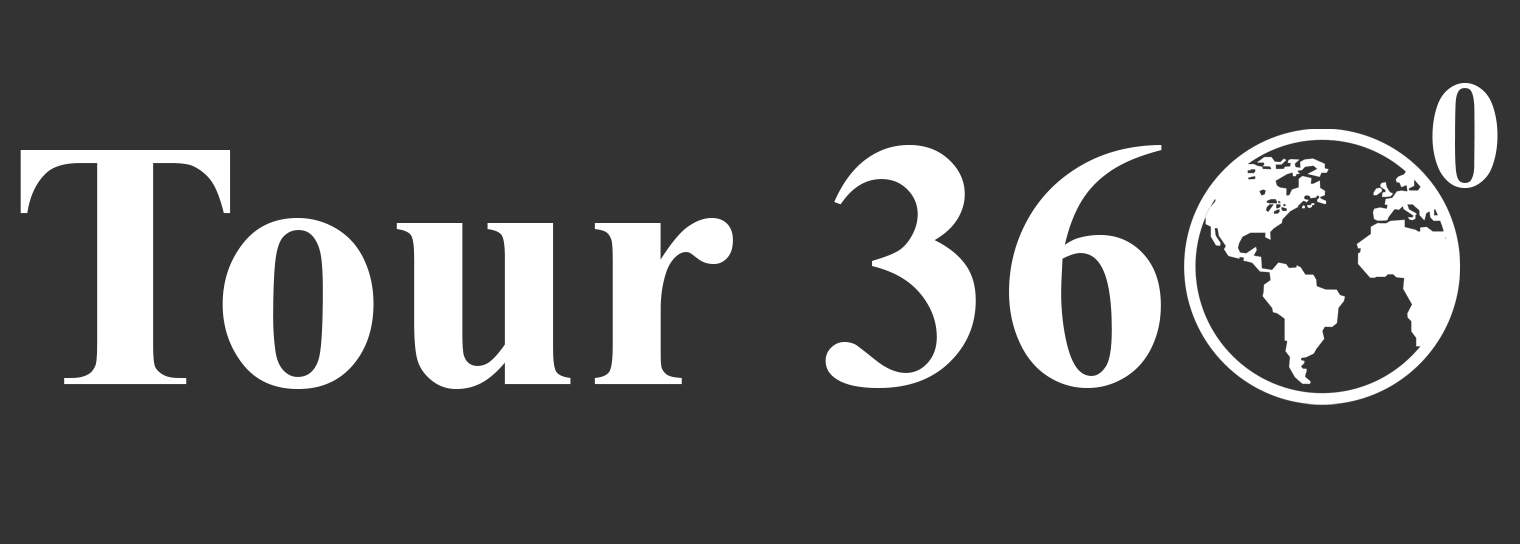
<style>
.page{position:relative;width:1520px;height:544px;background:#333333}
.page>*{position:absolute;margin:0}
.t1{font:152px "TimesNewRomanPS-BoldMT";color:#ffffff}
.t2{font:352px "TimesNewRomanPS-BoldMT";color:#ffffff}
</style>
<div class="page">
<p class="t1" style="left:1432px;top:83px;width:66px;height:105px">0</p>
<p class="t2" style="left:20px;top:145px;width:1142px;height:244px">Tour 36</p>
</div>
